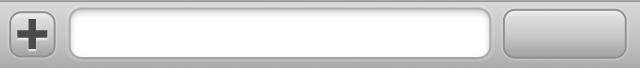
<style>
.page{position:relative;width:640px;height:68px;background:#ffffff}
.page>*{position:absolute;margin:0}
.t1{font:60px "Arial-BoldMT";color:#4b4b4b}
</style>
<div class="page">
<p class="t1" style="left:17px;top:19px;width:31px;height:30px">+</p>
</div>
